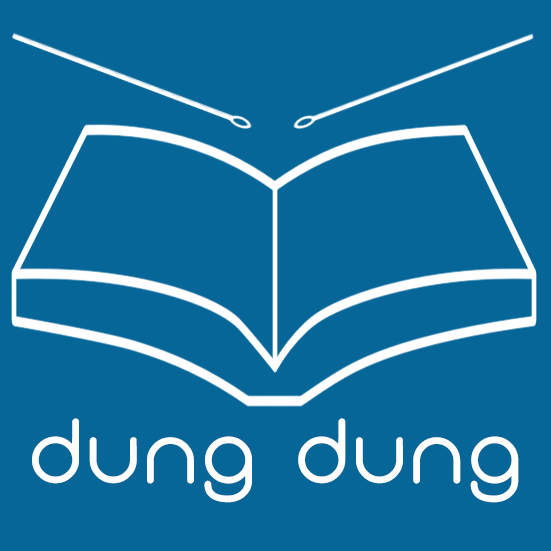
<style>
.page{position:relative;width:551px;height:551px;background:#066698}
.page>*{position:absolute;margin:0}
.t1{font:91.7px "Monoglyceride";letter-spacing:0.075em;color:#ffffff}
</style>
<div class="page">
<p class="t1" style="left:32px;top:418px;width:487px;height:85px">dung dung</p>
</div>
